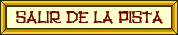
<style>
.page{position:relative;width:178px;height:35px;background:#ffffcc}
.page>*{position:absolute;margin:0}
.t1{font:17.5px "TikiHut";color:#770000;scale:0.94 1}
</style>
<div class="page">
<p class="t1" style="left:16px;top:11px;width:147px;height:13px">salir de la pista</p>
<p class="t1" style="left:16px;top:11px;width:147px;height:13px">salir de la pista</p>
</div>
